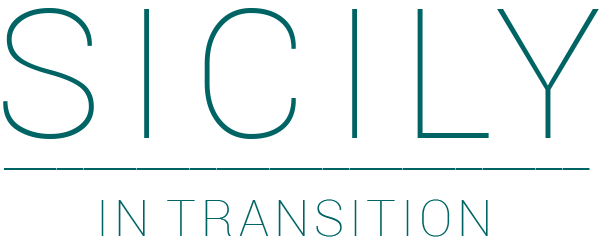
<style>
.page{position:relative;width:600px;height:247px;background:#ffffff}
.page>*{position:absolute;margin:0}
.t1{font:181px "Roboto-Thin";color:#006464}
.t2{font:62.5px "Roboto-Thin";color:#006464;scale:1.03 1}
.t3{font:50px "Roboto-Thin";color:#006464}
</style>
<div class="page">
<p class="t1" style="left:3px;top:8px;width:596px;height:131px">SICILY</p>
<p class="t2" style="left:3px;top:168px;width:587px;height:2px">_______________________</p>
<p class="t3" style="left:101px;top:199px;width:387px;height:38px">IN TRANSITION</p>
</div>
